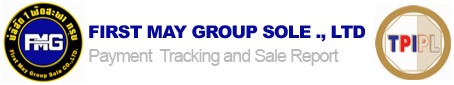
<style>
.page{position:relative;width:454px;height:85px;background:#ffffff}
.page>*{position:absolute;margin:0}
.t1{font:17.5px "Arial-Black";letter-spacing:-0.05em;color:#070b97}
.t2{font:17.5px "ArialMT";letter-spacing:-0.05em;color:#bababa}
</style>
<div class="page">
<p class="t1" style="left:89px;top:25px;width:276px;height:17px">FIRST MAY GROUP SOLE ., LTD</p>
<p class="t2" style="left:89px;top:49px;width:250px;height:17px">Payment  Tracking and Sale Report</p>
</div>
